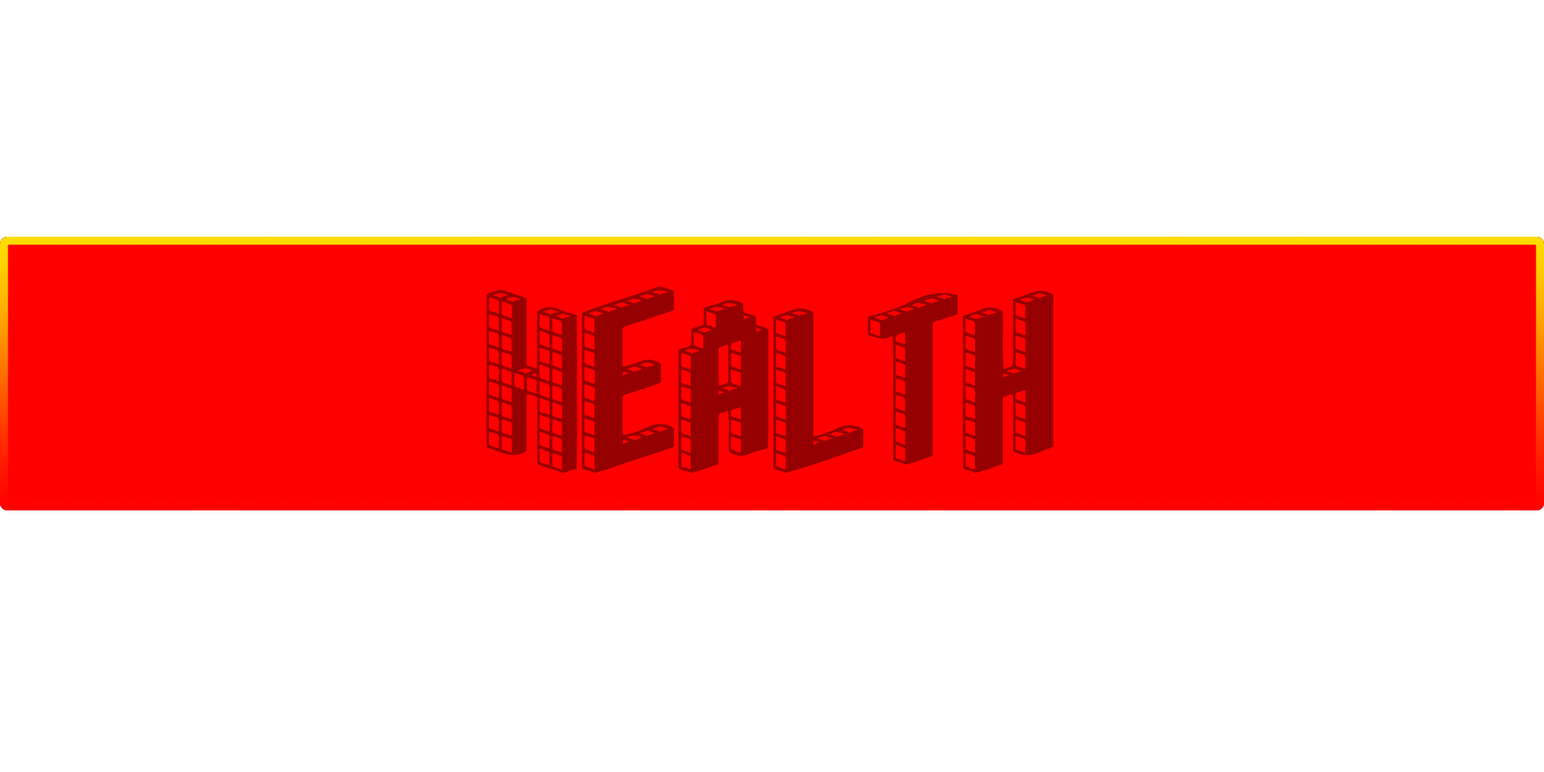
<style>
.page{position:relative;width:1544px;height:772px;background:#ffffff}
.page>*{position:absolute;margin:0}
.t1{font:191.5px "Blox-(BRK";color:#970000}
</style>
<div class="page">
<p class="t1" style="left:486px;top:286px;width:568px;height:187px">Health</p>
</div>
